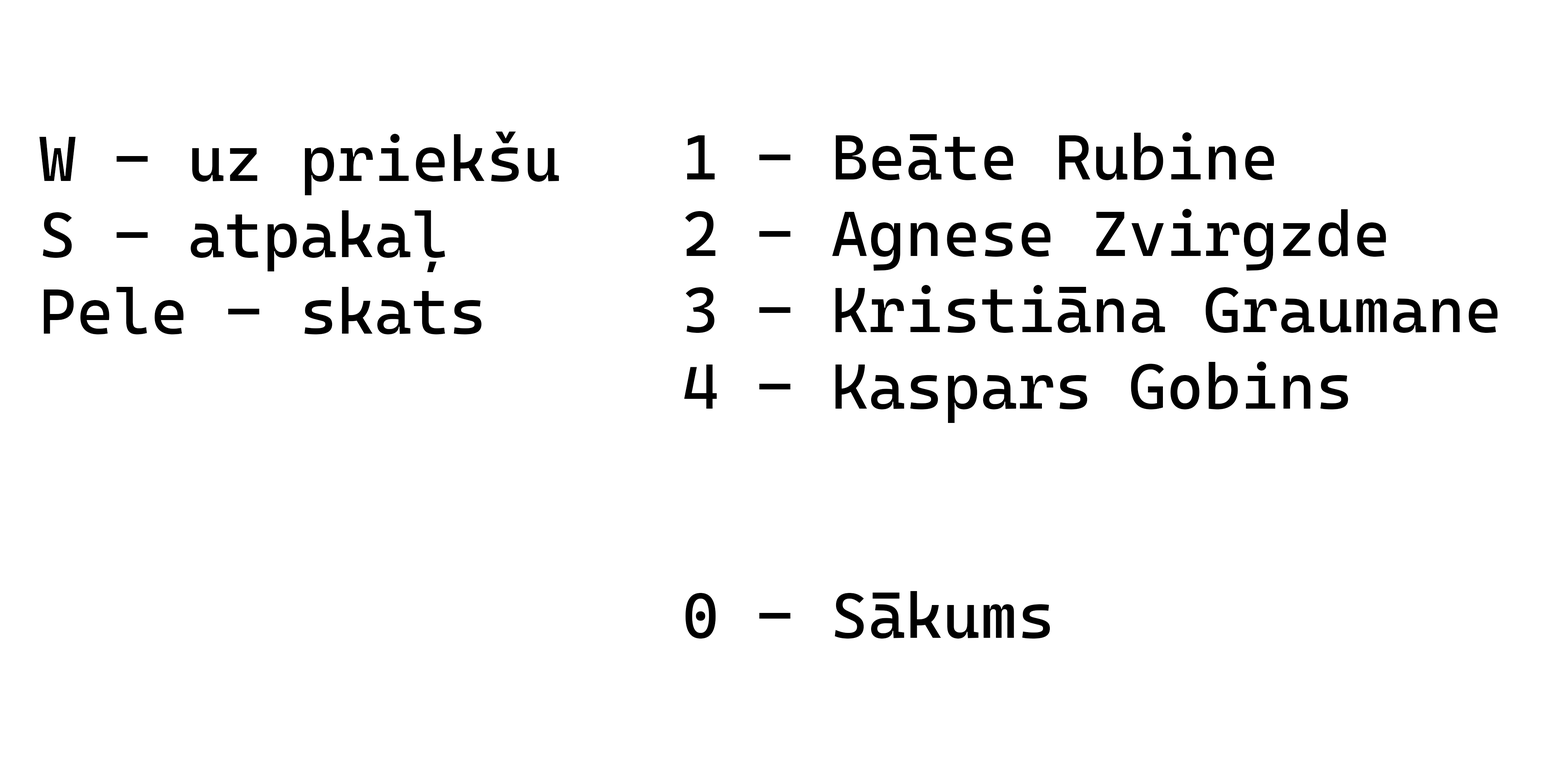
<style>
.page{position:relative;width:1544px;height:772px;background:#ffffff}
.page>*{position:absolute;margin:0}
.t1{font:63.6px "CascadiaMono-Roman";color:#000000}
</style>
<div class="page">
<p class="t1" style="left:39px;top:132px;width:520px;height:202px">W - uz priekšu<br>S - atpakaļ<br>Pele - skats</p>
<p class="t1" style="left:684px;top:132px;width:814px;height:507px">1 - Beāte Rubine<br>2 - Agnese Zvirgzde<br>3 - Kristiāna Graumane<br>4 - Kaspars Gobins<br><br><br>0 - Sākums</p>
</div>
